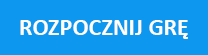
<style>
.page{position:relative;width:208px;height:55px;background:#0d97ef}
.page>*{position:absolute;margin:0}
.t1{font:24px "Calibri-Bold";color:#ffffff;text-transform:uppercase}
</style>
<div class="page">
<p class="t1" style="left:20px;top:20px;width:168px;height:19px">Rozpocznij grę</p>
</div>
